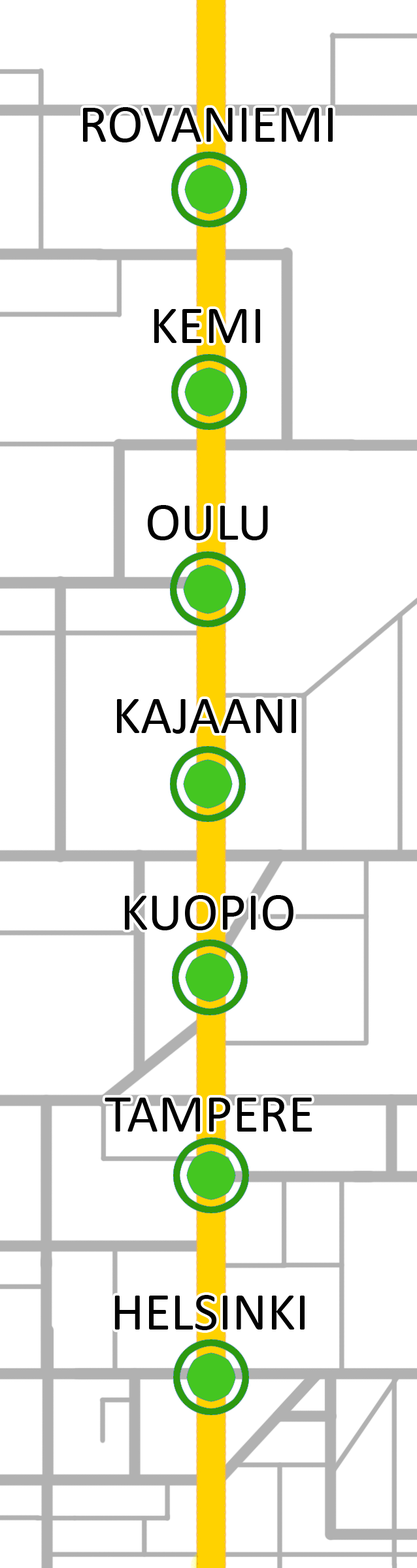
<style>
.page{position:relative;width:417px;height:1568px;background:#ffffff}
.page>*{position:absolute;margin:0}
.t1{font:54.2px "Calibri";color:#000000}
.t2{font:54.2px "Calibri";color:#010101}
</style>
<div class="page">
<p class="t1" style="left:83px;top:107px;width:250px;height:35px">ROVANIEMI</p>
<p class="t1" style="left:154px;top:309px;width:106px;height:34px">KEMI</p>
<p class="t1" style="left:148px;top:505px;width:120px;height:35px">OULU</p>
<p class="t1" style="left:117px;top:699px;width:179px;height:35px">KAJAANI</p>
<p class="t1" style="left:125px;top:895px;width:168px;height:35px">KUOPIO</p>
<p class="t1" style="left:105px;top:1098px;width:207px;height:34px">TAMPERE</p>
<p class="t2" style="left:114px;top:1295px;width:190px;height:35px">HELSINKI</p>
</div>
